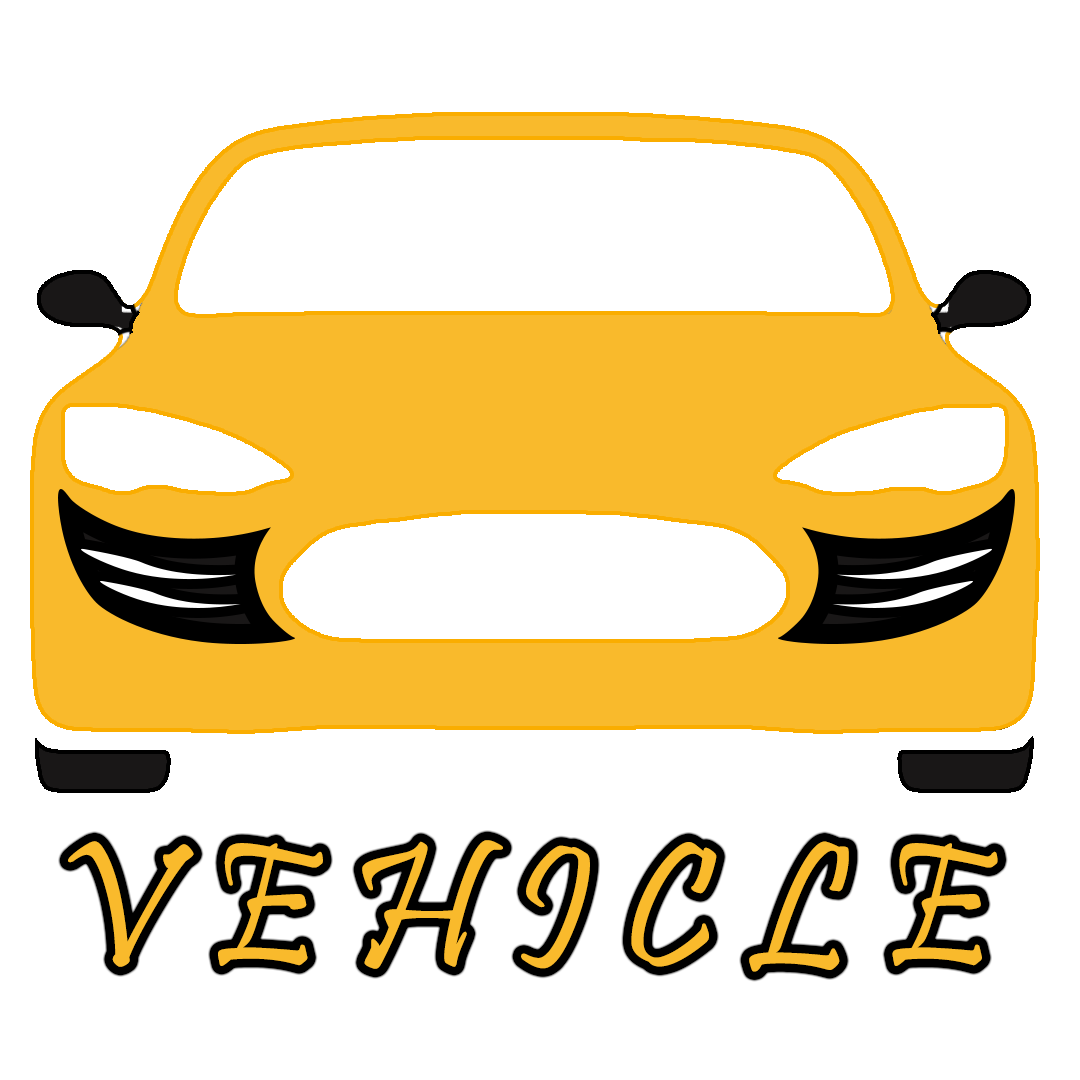
<style>
.page{position:relative;width:1080px;height:1080px;background:#ffffff}
.page>*{position:absolute;margin:0}
.t1{font:181.2px "Pristina-Regular";letter-spacing:0.2em;color:#f9ba2c}
</style>
<div class="page">
<p class="t1" style="left:68px;top:840px;width:930px;height:132px">VEHICLE</p>
</div>
